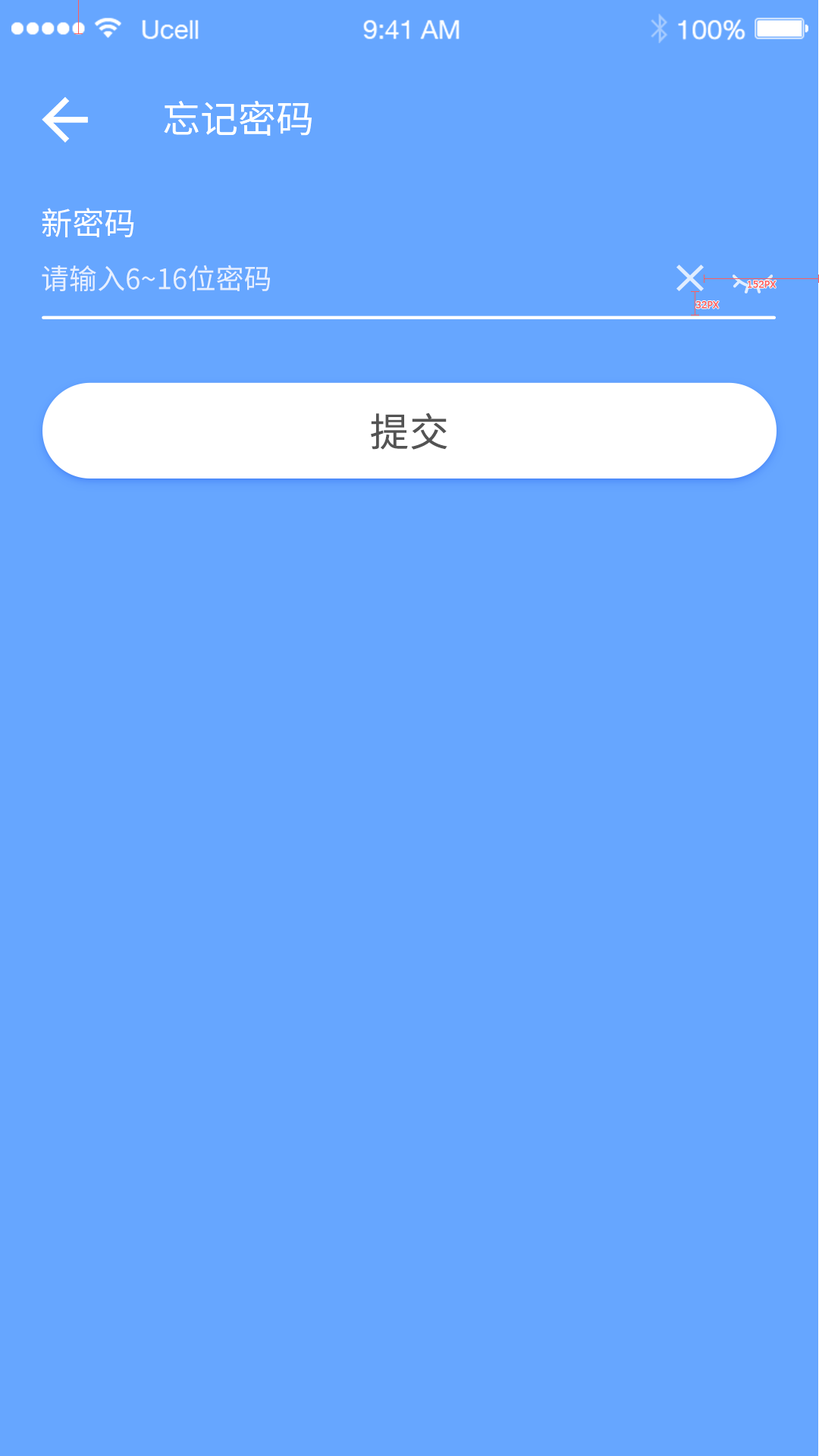
<style>
.page{position:relative;width:819px;height:1456px;background:#66a6ff}
.page>*{position:absolute;margin:0}
.t1{font:37.9px "NotoSansHans-Regular";color:#ffffff}
.t2{font:31.8px "NotoSansHans-Regular";color:#ffffff;text-transform:uppercase}
.t3{font:28.3px "NotoSansHans-Regular";color:#e6efff;text-transform:uppercase}
.t4{font:9.1px "Verdana";color:#ff5c5c;font-weight:bold}
.t5{font:39.2px "NotoSansHans-Regular";letter-spacing:0.02em;color:#535353}
</style>
<div class="page">
<p class="t1" style="left:164px;top:101px;width:148px;height:35px">忘记密码</p>
<p class="t2" style="left:42px;top:208px;width:92px;height:29px">新密码</p>
<p class="t3" style="left:42px;top:265px;width:228px;height:27px">请输入6~16位密码</p>
<p class="t4" style="left:748px;top:281px;width:29px;height:7px">152PX</p>
<p class="t4" style="left:695px;top:301px;width:24px;height:8px">32PX</p>
<p class="t5" style="left:371px;top:413px;width:76px;height:37px">提交</p>
</div>
